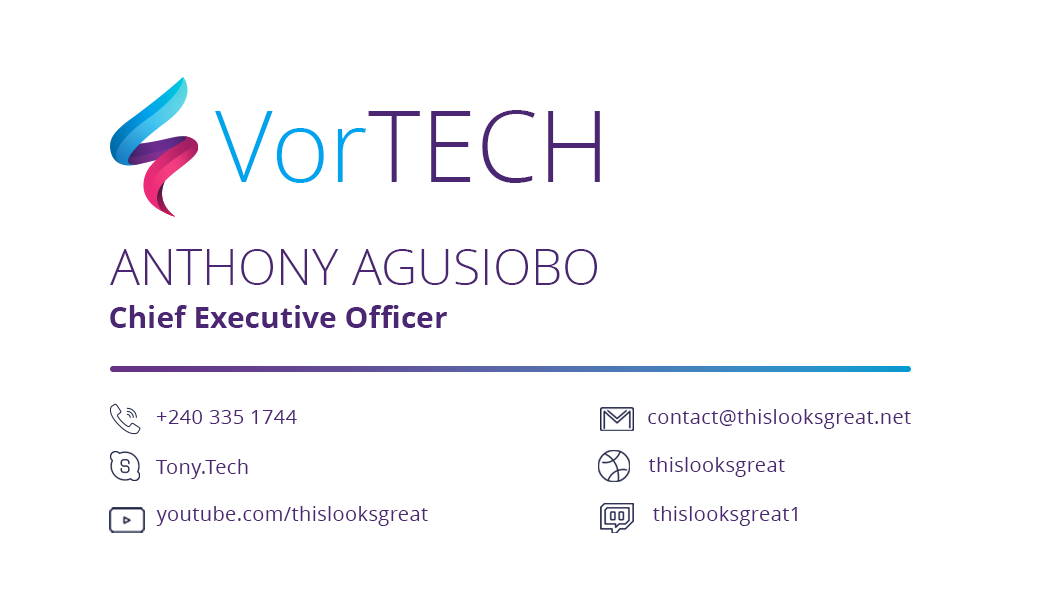
<style>
.page{position:relative;width:1050px;height:600px;background:#ffffff}
.page>*{position:absolute;margin:0}
.t1{font:100px "OpenSans-Light";color:#4b2672}
.t2{font:100px "OpenSans-Light";color:#00a4ec}
.t3{font:50px "OpenSans-Light";color:#4b2672;text-transform:uppercase}
.t4{font:30px "OpenSans-Bold";color:#4b2672}
.t5{font:20px "OpenSans";letter-spacing:0.02em;color:#4b2672}
</style>
<div class="page">
<p class="t1" style="left:215px;top:110px;width:385px;height:73px"><span class="t2">Vor</span>TECH</p>
<p class="t3" style="left:110px;top:249px;width:487px;height:36px">Anthony Agusiobo</p>
<p class="t4" style="left:110px;top:305px;width:337px;height:23px">Chief Executive Officer</p>
<p class="t5" style="left:156px;top:410px;width:141px;height:14px">+240 335 1744</p>
<p class="t5" style="left:648px;top:409px;width:263px;height:20px">contact@thislooksgreat.net</p>
<p class="t5" style="left:156px;top:459px;width:92px;height:20px">Tony.Tech</p>
<p class="t5" style="left:648px;top:457px;width:137px;height:20px">thislooksgreat</p>
<p class="t5" style="left:156px;top:506px;width:272px;height:20px">youtube.com/thislooksgreat</p>
<p class="t5" style="left:653px;top:506px;width:144px;height:20px">thislooksgreat1</p>
</div>
